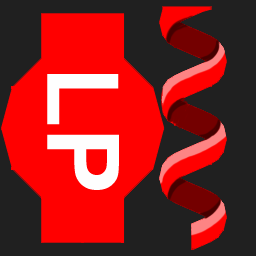
<style>
.page{position:relative;width:256px;height:256px;background:#202020}
.page>*{position:absolute;margin:0}
.t1{font:100px "Arial-BoldMT";color:#fefefe}
</style>
<div class="page">
<p class="t1" style="left:47px;top:74px;width:72px;height:116px;rotate:90deg">LP</p>
</div>
